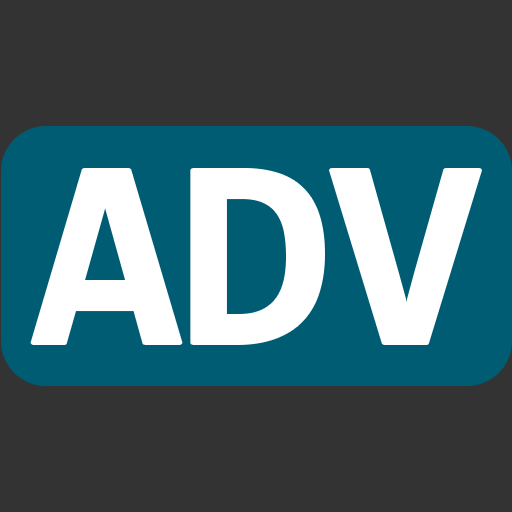
<style>
.page{position:relative;width:512px;height:512px;background:#333333}
.page>*{position:absolute;margin:0}
.t1{font:271px "Consolas-Bold";color:#ffffff}
</style>
<div class="page">
<p class="t1" style="left:32px;top:170px;width:448px;height:173px">ADV</p>
</div>
